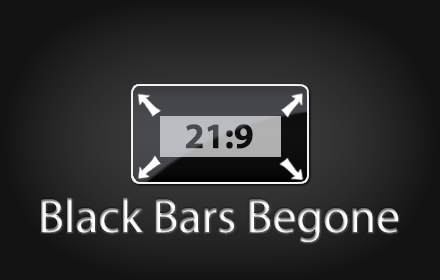
<style>
.page{position:relative;width:440px;height:280px}
.page>*{position:absolute;margin:0}
.t1{font:36px "MyriadPro-Bold"}
.t2{font:48px "MyriadPro-Regular"}
</style>
<div class="page">
<p class="t1" style="left:186px;top:124px;width:67px;height:25px">21:9</p>
<p class="t2" style="left:41px;top:197px;width:358px;height:45px">Black Bars Begone</p>
</div>
